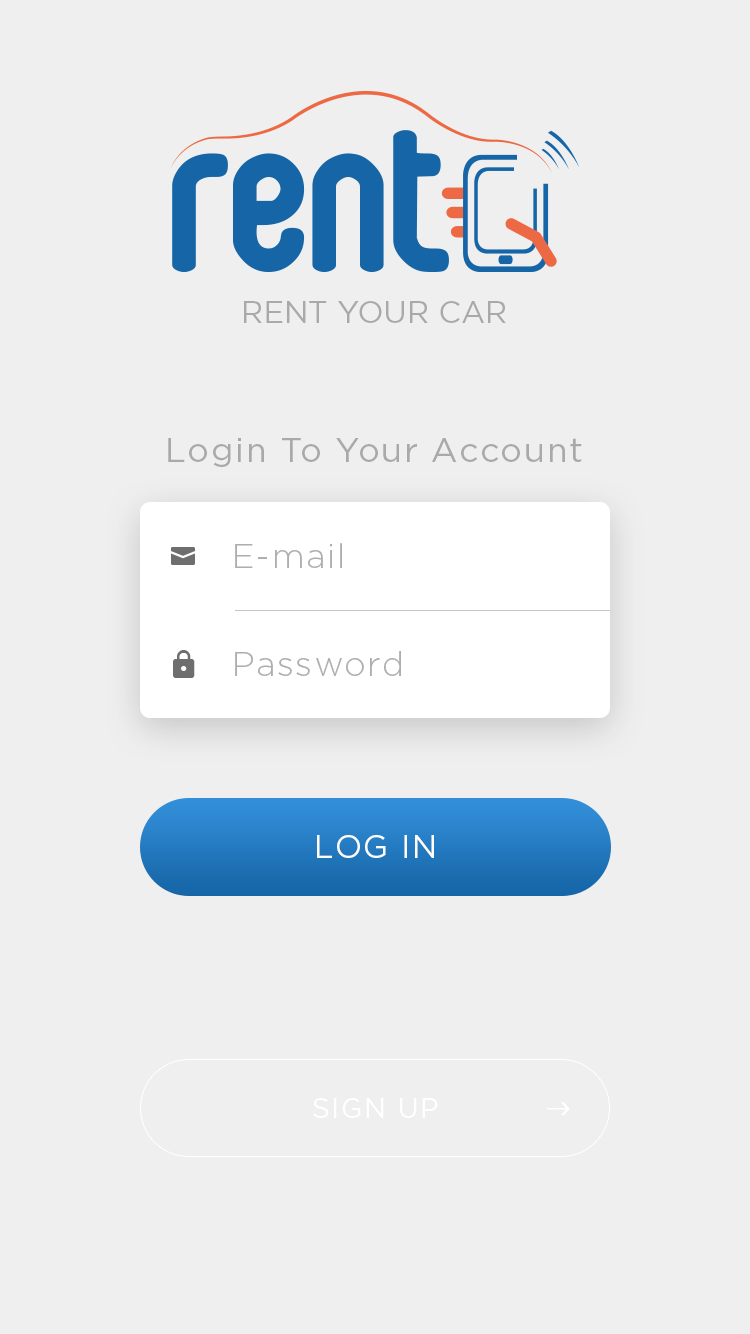
<style>
.page{position:relative;width:750px;height:1334px;background:#efefef}
.page>*{position:absolute;margin:0}
.t1{font:30.7px "Gotham-Book";color:#a9a9a9;text-transform:uppercase}
.t2{font:34px "Gotham-Book";letter-spacing:0.05em;color:#a9a9a9}
.t3{font:34px "Gotham-Light";letter-spacing:0.05em;color:#aeaeae}
.t4{font:32px "Gotham-Book";letter-spacing:0.05em;color:#fefefe;text-transform:uppercase}
.t5{font:28px "Gotham-Book";letter-spacing:0.05em;color:#ffffff;text-transform:uppercase}
</style>
<div class="page">
<p class="t1" style="left:244px;top:301px;width:262px;height:22px">rent your car</p>
<p class="t2" style="left:168px;top:438px;width:414px;height:29px">Login To Your Account</p>
<p class="t3" style="left:235px;top:543px;width:107px;height:25px">E-mail</p>
<p class="t3" style="left:235px;top:651px;width:166px;height:25px">Password</p>
<p class="t4" style="left:317px;top:835px;width:117px;height:23px">Log In</p>
<p class="t5" style="left:313px;top:1098px;width:125px;height:20px">sign up</p>
</div>
